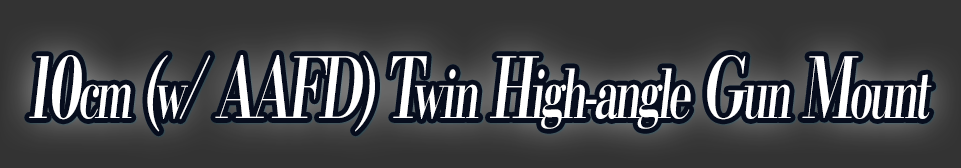
<style>
.page{position:relative;width:961px;height:168px;background:#333333}
.page>*{position:absolute;margin:0}
.t1{font:84px "KochoStd-Heavy";letter-spacing:-0.08em;color:#ffffff;font-style:italic;scale:0.64 1}
.t2{font:67.2px "KochoStd-Heavy";letter-spacing:-0.08em;color:#ffffff;font-style:italic;scale:0.64 1}
</style>
<div class="page">
<p class="t1" style="left:29px;top:55px;width:903px;height:77px">10<span class="t2">cm</span> (<span class="t2">w</span>/ AAFD) T<span class="t2">win</span> H<span class="t2">igh-angle</span> G<span class="t2">un </span>M<span class="t2">ount</span></p>
</div>
